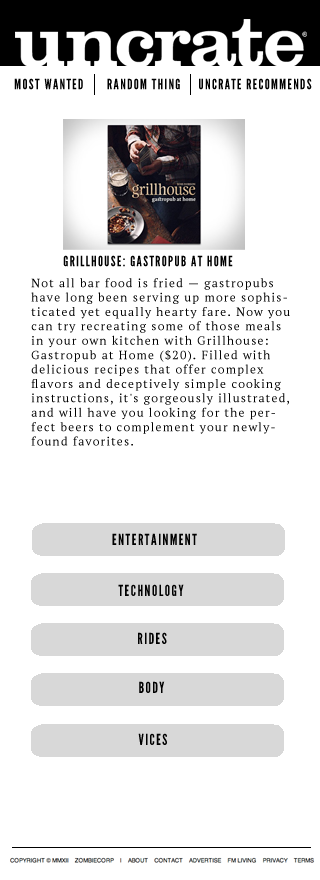
<style>
.page{position:relative;width:320px;height:880px;background:#ffffff}
.page>*{position:absolute;margin:0}
.t1{font:14px "LeagueGothic";letter-spacing:0.1em;color:#000000;text-transform:uppercase}
.t2{font:12px "PTSerif-Regular";letter-spacing:0.1em;color:#000000}
.t3{font:15px "LeagueGothic";letter-spacing:0.1em;color:#000000;text-transform:uppercase}
</style>
<div class="page">
<p class="t1" style="left:14px;top:78px;width:69px;height:12px">Most Wanted</p>
<p class="t1" style="left:107px;top:78px;width:73px;height:12px">Random Thing</p>
<p class="t1" style="left:199px;top:78px;width:113px;height:12px">Uncrate Recommends</p>
<p class="t1" style="left:63px;top:255px;width:170px;height:12px">GRILLHOUSE: GASTROPUB AT HOME</p>
<p class="t2" style="left:31px;top:278px;width:259px;height:168px">Not all bar food is fried — gastropubs have long been serving up more sophisticated yet equally hearty fare. Now you can try recreating some of those meals in your own kitchen with Grillhouse: Gastropub at Home ($20). Filled with delicious recipes that offer complex flavors and deceptively simple cooking instructions, it's gorgeously illustrated, and will have you looking for the perfect beers to complement your newly-found favorites.</p>
<p class="t3" style="left:112px;top:533px;width:85px;height:12px">Entertainment</p>
<p class="t3" style="left:118px;top:584px;width:66px;height:12px">Technology</p>
<p class="t3" style="left:138px;top:632px;width:29px;height:12px">Rides</p>
<p class="t3" style="left:139px;top:681px;width:26px;height:12px">Body</p>
<p class="t3" style="left:138px;top:733px;width:29px;height:12px">Vices</p>
</div>
